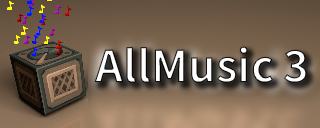
<style>
.page{position:relative;width:320px;height:128px}
.page>*{position:absolute;margin:0}
.t1{font:43.6px "SourceHanSansCNVF-Bold"}
</style>
<div class="page">
<p class="t1" style="left:94px;top:46px;width:213px;height:37px">AllMusic 3</p>
</div>
